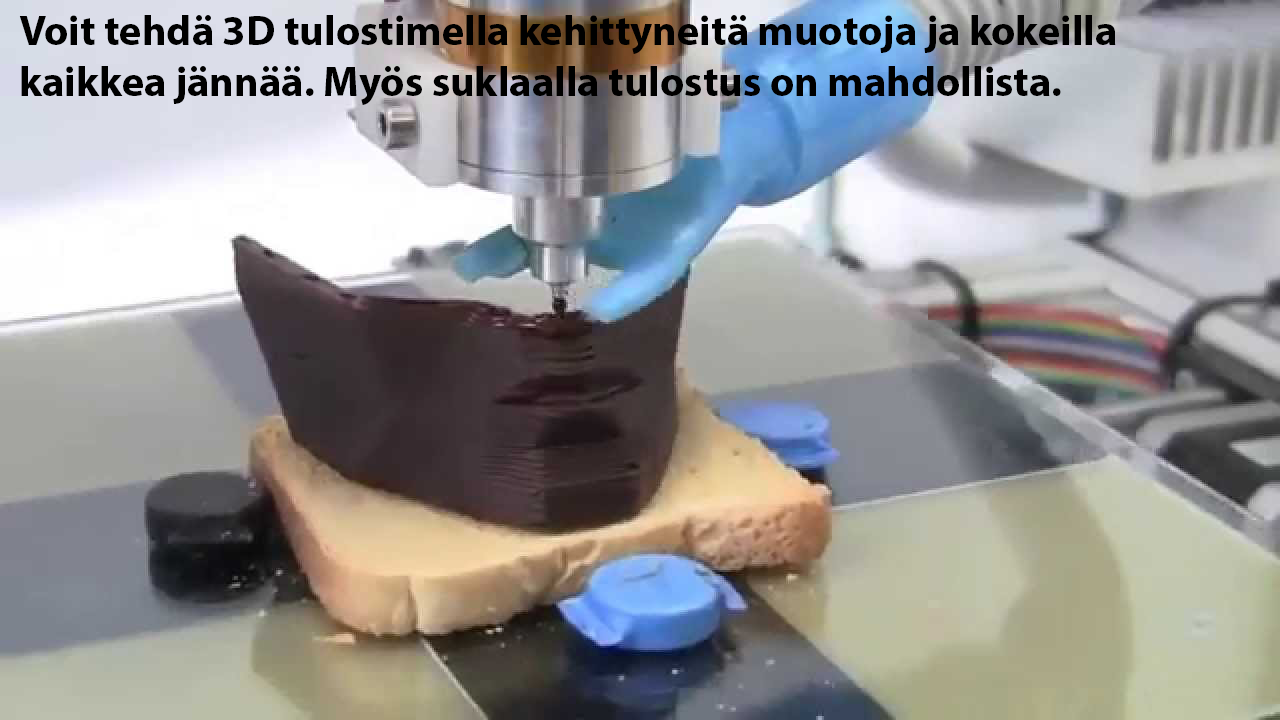
<style>
.page{position:relative;width:1280px;height:720px}
.page>*{position:absolute;margin:0}
.t1{font:42.3px "MyriadPro-Bold";color:#000000}
</style>
<div class="page">
<p class="t1" style="left:19px;top:15px;width:1097px;height:90px">Voit tehdä 3D tulostimella kehittyneitä muotoja ja kokeilla <br>kaikkea jännää. Myös suklaalla tulostus on mahdollista.</p>
</div>
